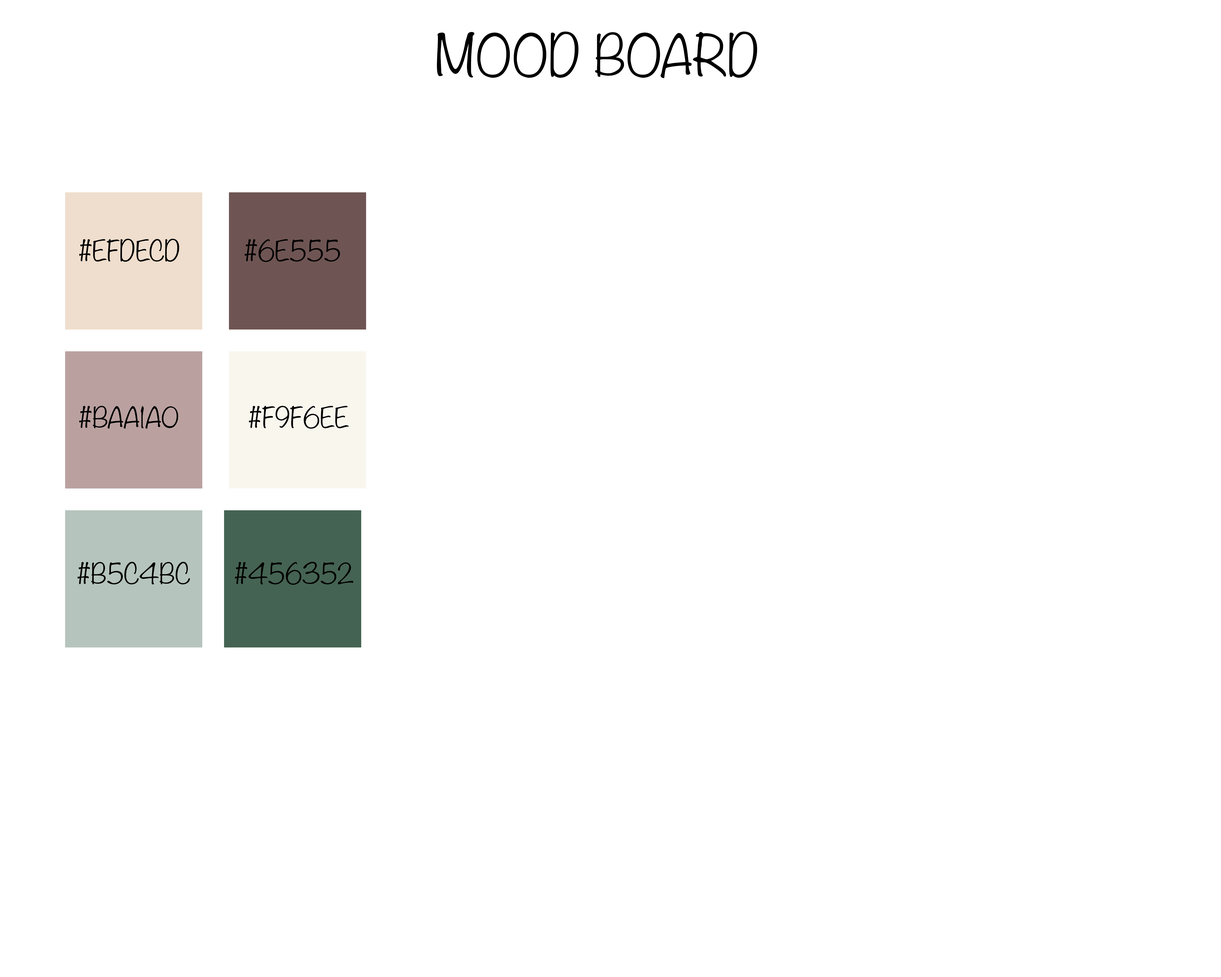
<style>
.page{position:relative;width:1221px;height:977px;background:#ffffff}
.page>*{position:absolute;margin:0}
.t1{font:50.9px "Noteworthy-Light";color:#000000}
.t2{font:25.4px "Noteworthy-Light";color:#000000}
</style>
<div class="page">
<p class="t1" style="left:437px;top:32px;width:320px;height:46px">MOOD BOARD</p>
<p class="t2" style="left:79px;top:239px;width:100px;height:23px">#EFDECD</p>
<p class="t2" style="left:245px;top:239px;width:95px;height:23px">#6E5553</p>
<p class="t2" style="left:79px;top:406px;width:99px;height:23px">#BAA1A0</p>
<p class="t2" style="left:249px;top:406px;width:100px;height:23px">#F9F6EE</p>
<p class="t2" style="left:78px;top:562px;width:112px;height:22px">#B5C4BC</p>
<p class="t2" style="left:235px;top:562px;width:118px;height:23px">#456352</p>
</div>
